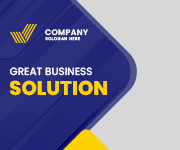
<style>
.page{position:relative;width:180px;height:150px;background:#d7d7d7}
.page>*{position:absolute;margin:0}
.t1{font:7.9px "Poppins-SemiBold";letter-spacing:0.05em;color:#ffffff}
.t2{font:3.9px "Poppins-Medium";letter-spacing:0.125em;color:#ffffff}
.t3{font:10.5px "Poppins-Medium";color:#ffffff}
.t4{font:20px "Poppins-ExtraBold";color:#fed202}
</style>
<div class="page">
<p class="t1" style="left:45px;top:29px;width:43px;height:7px">COMPANY</p>
<p class="t2" style="left:45px;top:37px;width:35px;height:4px">SOLOGAN HERE</p>
<p class="t3" style="left:10px;top:67px;width:82px;height:9px">GREAT BUSINESS</p>
<p class="t4" style="left:10px;top:80px;width:97px;height:16px">SOLUTION</p>
</div>
